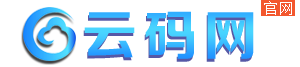
<style>
.page{position:relative;width:300px;height:67px;background:#ffffff}
.page>*{position:absolute;margin:0}
.t1{font:55px "FZZCHJW--GB1-0";letter-spacing:0.1em}
</style>
<div class="page">
<p class="t1" style="left:84px;top:11px;width:170px;height:48px">云码网</p>
</div>
